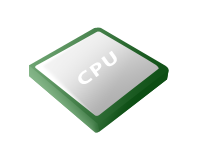
<style>
.page{position:relative;width:200px;height:161px;background:#ffffff}
.page>*{position:absolute;margin:0}
.t1{font:18px "MyriadPro-Bold";letter-spacing:0.05em;color:#ffffff;scale:1.3 1}
</style>
<div class="page">
<p class="t1" style="left:78px;top:50px;width:39px;height:34px;rotate:-35deg">CPU</p>
</div>
